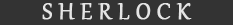
<style>
.page{position:relative;width:233px;height:25px;background:#333333}
.page>*{position:absolute;margin:0}
.t1{font:28px "Gabriola";color:#e5e5e5;font-weight:bold}
</style>
<div class="page">
<p class="t1" style="left:42px;top:3px;width:150px;height:17px">S H E R L O C K</p>
</div>
